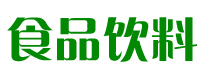
<style>
.page{position:relative;width:209px;height:73px;background:#ffffff}
.page>*{position:absolute;margin:0}
.t1{font:48px "FZCQJW--GB1-0";color:#038804}
</style>
<div class="page">
<p class="t1" style="left:7px;top:17px;width:190px;height:45px">食品饮料</p>
</div>
